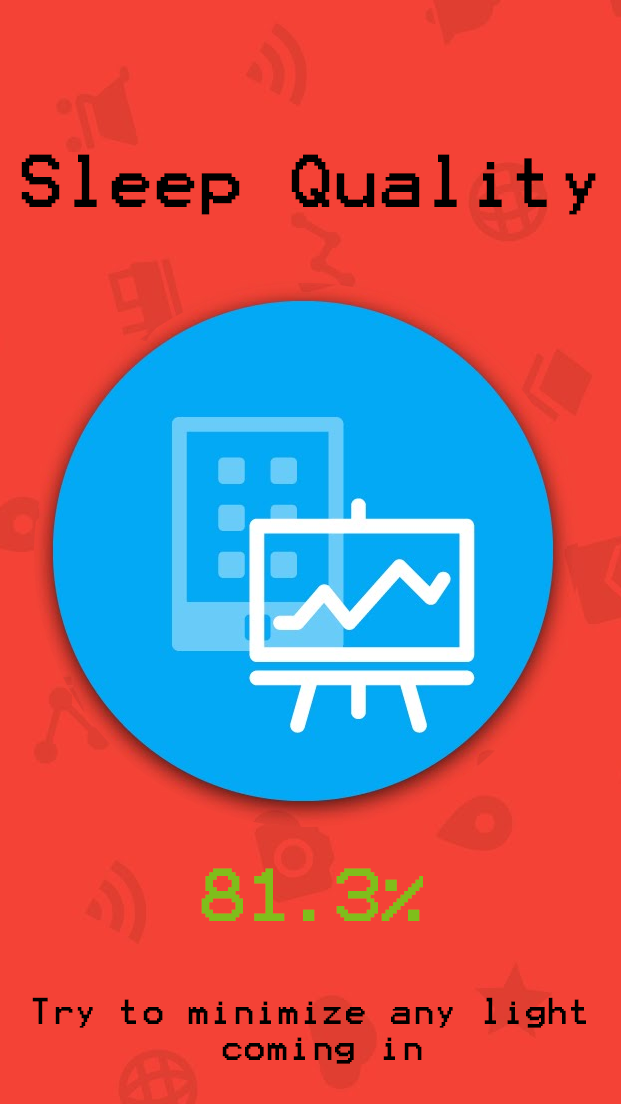
<style>
.page{position:relative;width:621px;height:1104px;background:#f44236}
.page>*{position:absolute;margin:0}
.t1{font:60px "Terminal";color:#000000}
.t2{font:60px "Terminal";color:#7fbe1b}
.t3{font:30px "Terminal";color:#000000}
</style>
<div class="page">
<p class="t1" style="left:21px;top:154px;width:575px;height:61px">Sleep Quality</p>
<p class="t2" style="left:201px;top:868px;width:222px;height:53px">81.3%</p>
<p class="t3" style="left:32px;top:997px;width:554px;height:67px;text-align:center">Try to minimize any light <br>coming in</p>
</div>
